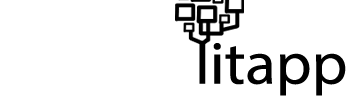
<style>
.page{position:relative;width:350px;height:100px;background:#ffffff}
.page>*{position:absolute;margin:0}
.t1{font:60px "MyriadPro-Regular";color:#000000;scale:1.05 1}
</style>
<div class="page">
<p class="t1" style="left:199px;top:41px;width:147px;height:55px">litapp</p>
</div>
